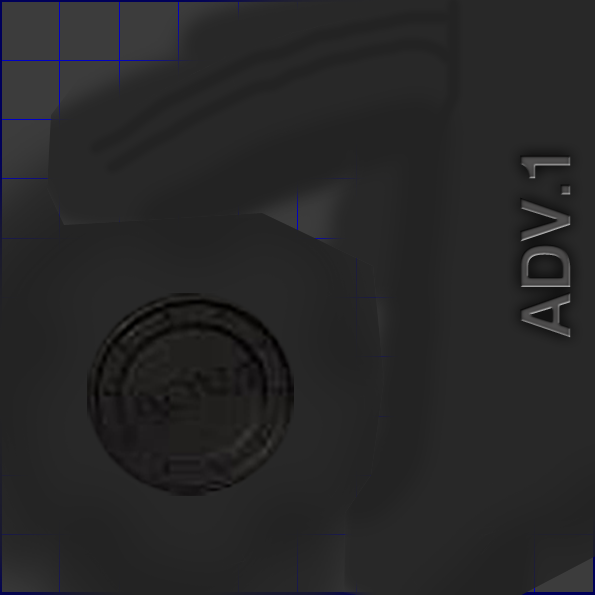
<style>
.page{position:relative;width:595px;height:595px;background:#282828}
.page>*{position:absolute;margin:0}
.t1{font:69.8px "HeldustryFTVBasic-Demi"}
</style>
<div class="page">
<p class="t1" style="left:520px;top:155px;width:51px;height:183px;rotate:-90deg">ADV.1</p>
</div>
